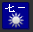
<style>
.page{position:relative;width:33px;height:32px;background:#000090}
.page>*{position:absolute;margin:0}
.t1{font:10.4px "SimSun";color:#ffffff}
</style>
<div class="page">
<p class="t1" style="left:5px;top:4px;width:20px;height:8px">七一</p>
</div>
